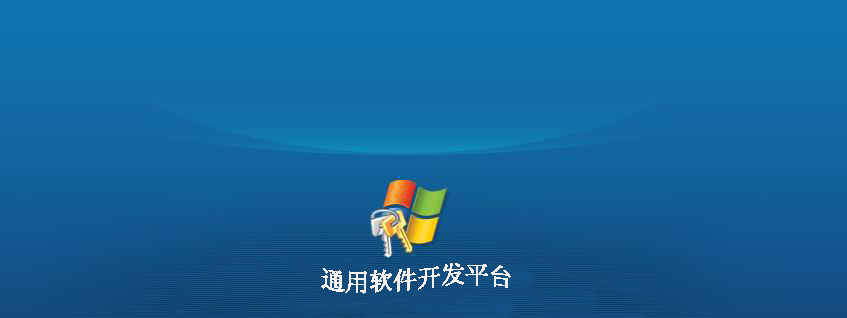
<style>
.page{position:relative;width:847px;height:318px}
.page>*{position:absolute;margin:0}
.t1{font:24px "SimSun";color:#f9f2f0}
</style>
<div class="page">
<p class="t1" style="left:321px;top:263px;width:190px;height:31px">通用软件开发平台</p>
</div>
